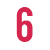
<style>
.page{position:relative;width:50px;height:50px;background:#ffffff}
.page>*{position:absolute;margin:0}
.t1{font:39px "Bebas";color:#d4264f}
</style>
<div class="page">
<p class="t1" style="left:16px;top:7px;width:17px;height:35px">6</p>
</div>
